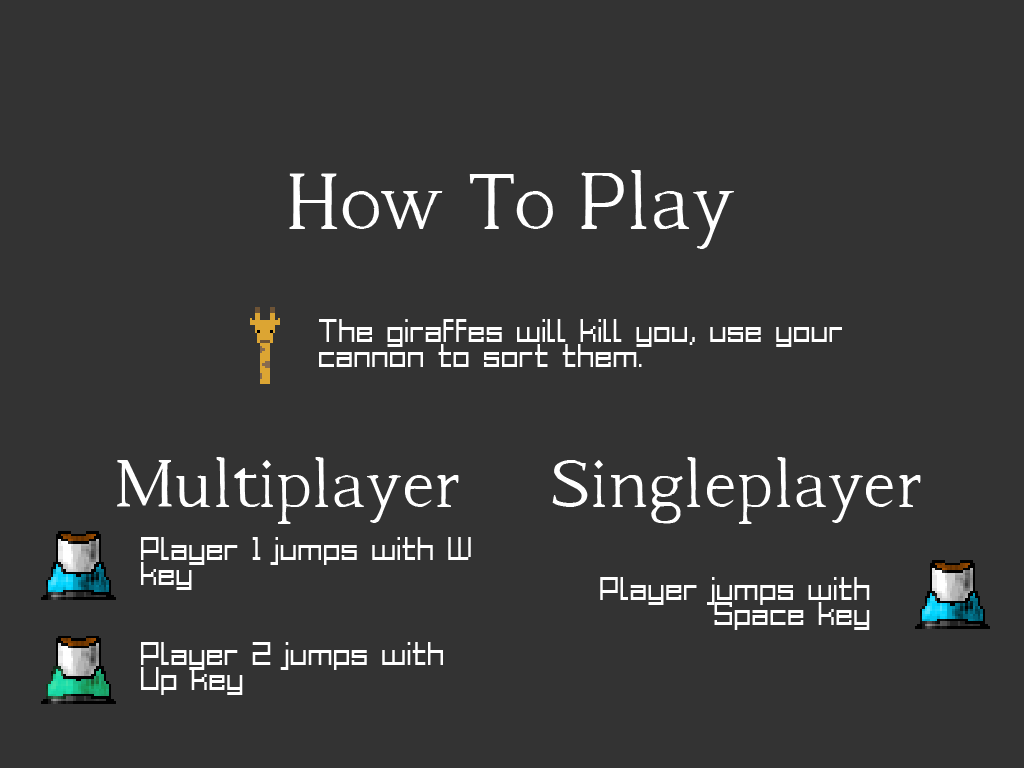
<style>
.page{position:relative;width:1024px;height:768px;background:#333333}
.page>*{position:absolute;margin:0}
.t1{font:91.4px "Beholden-Regular";color:#ffffff}
.t2{font:20.3px "GrixelAcme9Regular";color:#ffffff}
.t3{font:76.2px "Beholden-Regular";color:#ffffff}
</style>
<div class="page">
<p class="t1" style="left:289px;top:170px;width:445px;height:79px">How To Play</p>
<p class="t2" style="left:319px;top:319px;width:523px;height:48px">The giraffes will kill you, use your cannon to sort them.</p>
<p class="t3" style="left:117px;top:457px;width:342px;height:67px">Multiplayer</p>
<p class="t3" style="left:552px;top:457px;width:369px;height:67px">Singleplayer</p>
<p class="t2" style="left:141px;top:537px;width:330px;height:53px">Player 1 jumps with W key</p>
<p class="t2" style="left:600px;top:577px;width:270px;height:53px;text-align:right">Player jumps with Space key</p>
<p class="t2" style="left:141px;top:642px;width:302px;height:53px">Player 2 jumps with Up key</p>
</div>
